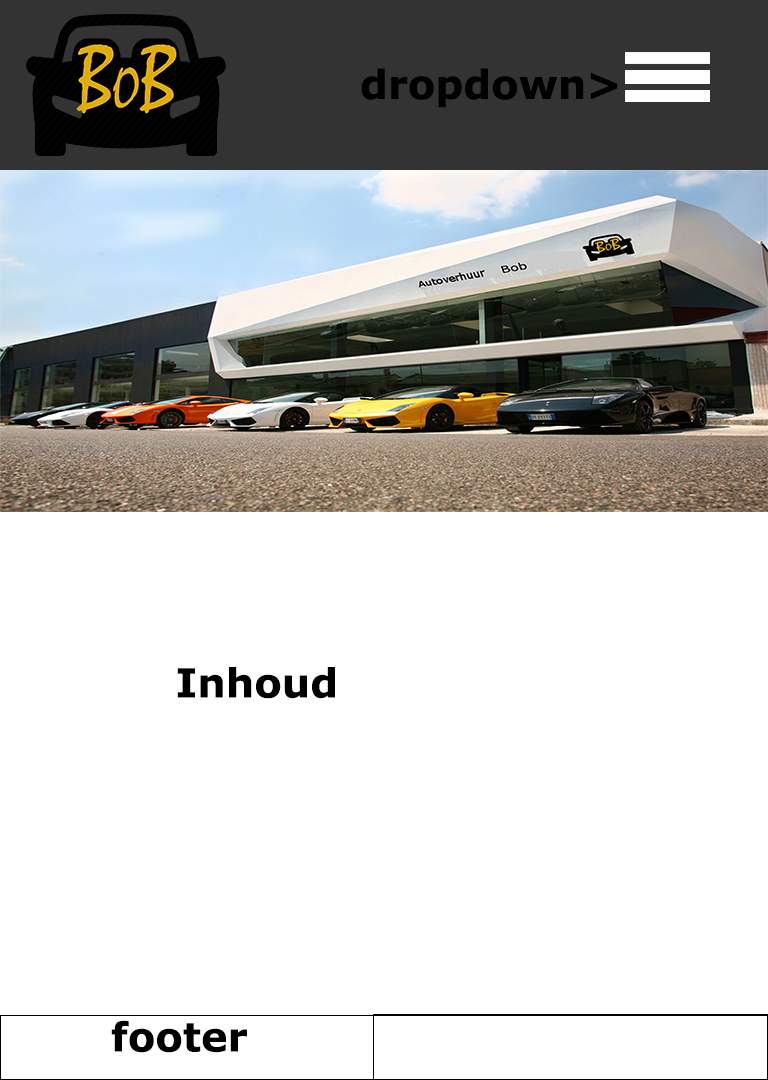
<style>
.page{position:relative;width:768px;height:1080px;background:#ffffff}
.page>*{position:absolute;margin:0}
.t1{font:40px "Verdana-Bold";color:#000000}
</style>
<div class="page">
<p class="t1" style="left:361px;top:68px;width:257px;height:40px">dropdown&gt;</p>
<p class="t1" style="left:177px;top:667px;width:158px;height:32px">Inhoud</p>
<p class="t1" style="left:111px;top:1020px;width:136px;height:33px">footer</p>
</div>
